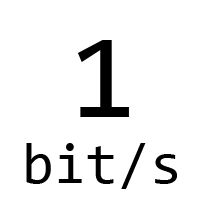
<style>
.page{position:relative;width:200px;height:200px;background:#ffffff}
.page>*{position:absolute;margin:0}
.t1{font:120.8px "Consolas";color:#000000}
.t2{font:58.3px "Consolas";color:#000000}
</style>
<div class="page">
<p class="t1" style="left:77px;top:40px;width:52px;height:77px">1</p>
<p class="t2" style="left:26px;top:143px;width:151px;height:46px">bit/s</p>
</div>
